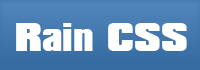
<style>
.page{position:relative;width:200px;height:70px;background:#ffffff}
.page>*{position:absolute;margin:0}
.t1{font:34px "CompactaBT-Black";color:#ffffff}
</style>
<div class="page">
<p class="t1" style="left:16px;top:23px;width:171px;height:28px">Rain CSS</p>
</div>
